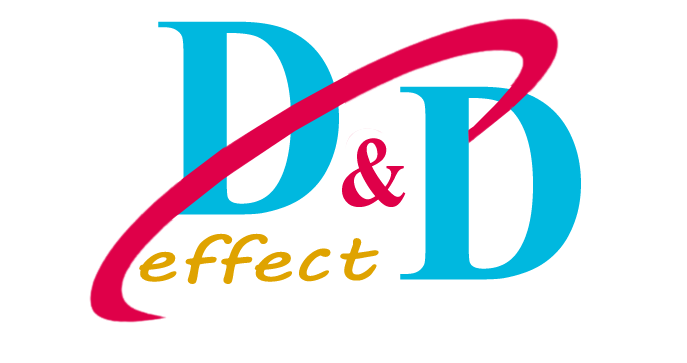
<style>
.page{position:relative;width:687px;height:363px;background:#ffffff}
.page>*{position:absolute;margin:0}
.t1{font:290.6px "TimesNewRomanPS-BoldMT";color:#00b8df;scale:0.93 1}
.t2{font:98.9px "TimesNewRomanPS-BoldMT";color:#df0049;scale:0.85 1}
.t3{font:66.4px "MVBoli";color:#dfa300;scale:1.35 1}
</style>
<div class="page">
<p class="t1" style="left:158px;top:21px;width:181px;height:194px">D</p>
<p class="t1" style="left:400px;top:86px;width:181px;height:194px">D</p>
<p class="t2" style="left:342px;top:138px;width:64px;height:69px">&amp;</p>
<p class="t3" style="left:139px;top:233px;width:240px;height:51px">effect</p>
</div>
